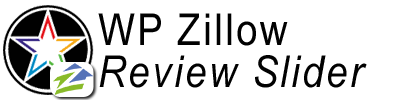
<style>
.page{position:relative;width:420px;height:100px;background:#ffffff}
.page>*{position:absolute;margin:0}
.t1{font:44px/42px "Arial-ItalicMT";letter-spacing:0.06em;color:#010101;scale:0.88 1}
.t2{font:44px/42px "ArialMT";letter-spacing:0.06em;color:#010101;scale:0.88 1}
</style>
<div class="page">
<p class="t1" style="left:98px;top:13px;width:269px;height:75px"><span class="t2">WP Zillow<br></span>Review Slider</p>
</div>
